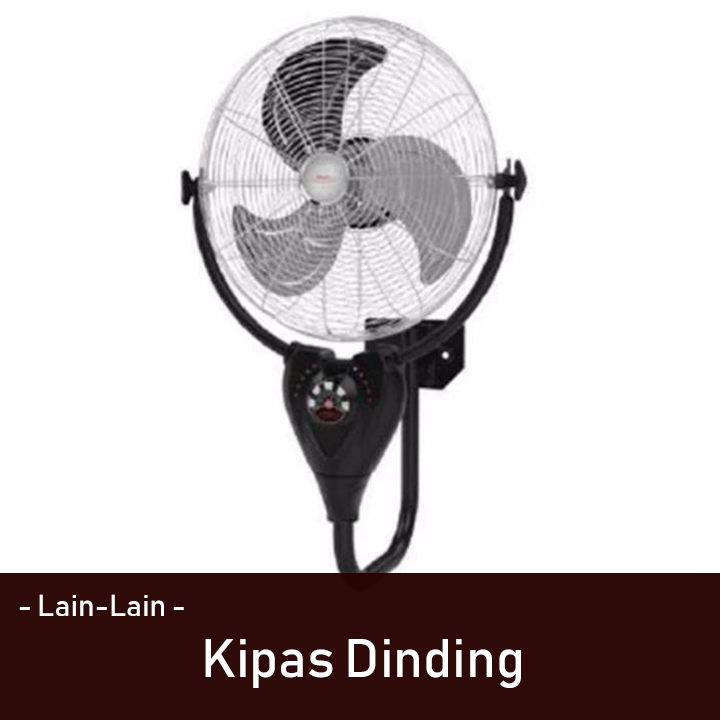
<style>
.page{position:relative;width:720px;height:720px;background:#fefefe}
.page>*{position:absolute;margin:0}
.t1{font:30px "Bahnschrift";color:#ffffff}
.t2{font:53.6px "Bahnschrift";color:#ffffff}
</style>
<div class="page">
<p class="t1" style="left:19px;top:594px;width:165px;height:22px">- Lain-Lain -</p>
<p class="t2" style="left:205px;top:639px;width:316px;height:49px">Kipas Dinding</p>
</div>
